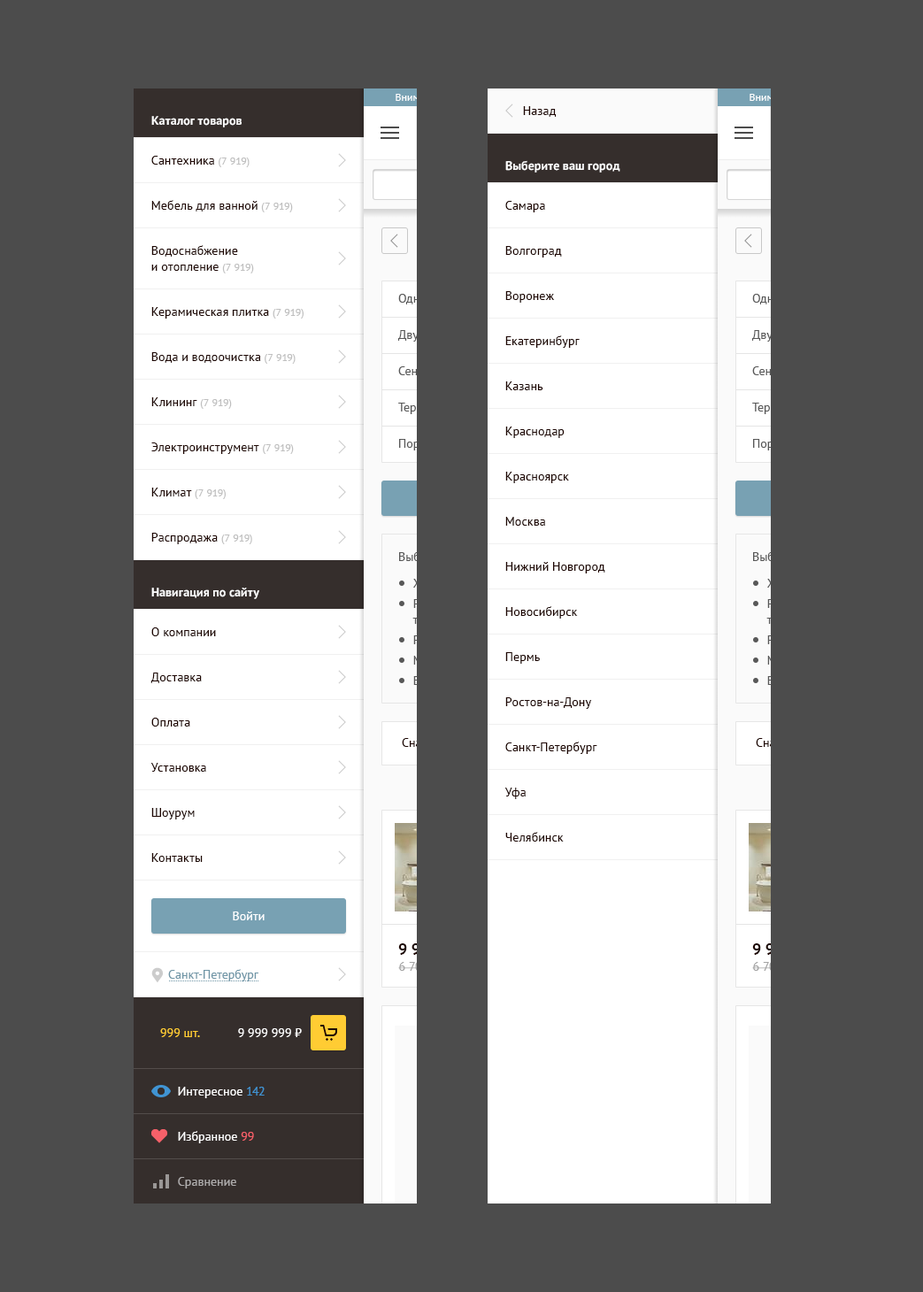
<style>
.page{position:relative;width:923px;height:1292px;background:#4c4c4c}
.page>*{position:absolute;margin:0}
.t1{font:12.4px "PTSans-Regular";color:#1e0602}
.t2{font:12.4px "PTSans-Bold";color:#ffffff}
.t3{font:12.4px/15.9px "PTSans-Regular";color:#1e0602}
.t4{font:10.6px/14.2px "PTSans-Regular";color:#bfbfbf}
.t5{font:12.4px "PTSans-Regular";color:#ffffff}
.t6{font:12.4px "PTSans-Regular";color:#6f95a6}
.t7{font:12.4px "PTSans-Regular";color:#ffcc33}
.t8{font:12.4px/17.7px "PTSans-Regular";color:#ffffff}
.t9{font:12.4px/17.7px "PTSans-Regular";color:#4094d3}
.t10{font:12.4px/15.9px "PTSans-Regular";color:#ffffff}
.t11{font:12.4px/15.9px "PTSans-Regular";color:#f66069}
.t12{font:12.4px/15.9px "PTSans-Regular";color:#aeacac}
</style>
<div class="page">
<p class="t1" style="left:523px;top:106px;width:34px;height:11px">Назад</p>
<p class="t2" style="left:151px;top:116px;width:91px;height:11px">Каталог товаров</p>
<p class="t3" style="left:151px;top:156px;width:153px;height:388px">Сантехника <span class="t4">(7 919)<br></span>Мебель для ванной <span class="t4">(7 919)<br></span>Водоснабжение<br>и отопление <span class="t4">(7 919)<br></span>Керамическая плитка <span class="t4">(7 919)<br></span>Вода и водоочистка <span class="t4">(7 919)<br></span>Клининг <span class="t4">(7 919)<br></span>Электроинструмент <span class="t4">(7 919)<br></span>Климат <span class="t4">(7 919)<br></span>Распродажа <span class="t4">(7 919)</span></p>
<p class="t2" style="left:505px;top:160px;width:115px;height:13px">Выберите ваш город</p>
<p class="t3" style="left:504px;top:201px;width:101px;height:641px">Самара<br>Волгоград<br>Воронеж<br>Екатеринбург<br>Казань<br>Краснодар<br>Красноярск<br>Москва<br>Нижний Новгород<br>Новосибирск<br>Пермь<br>Ростов-на-Дону<br>Санкт-Петербург<br>Уфа<br>Челябинск</p>
<p class="t2" style="left:151px;top:588px;width:108px;height:11px">Навигация по сайту</p>
<p class="t3" style="left:150px;top:627px;width:66px;height:235px">О компании<br>Доставка<br>Оплата<br>Установка<br>Шоурум<br>Контакты</p>
<p class="t5" style="left:233px;top:911px;width:32px;height:9px">Войти</p>
<p class="t6" style="left:168px;top:969px;width:90px;height:12px">Санкт-Петербург</p>
<p class="t7" style="left:160px;top:1028px;width:40px;height:9px">999 шт.</p>
<p class="t5" style="left:238px;top:1028px;width:64px;height:9px">9 999 999 ₽</p>
<p class="t8" style="left:178px;top:1087px;width:87px;height:101px">Интересное <span class="t9">142<br></span><span class="t10">Избранное </span><span class="t11">99<br></span><span class="t12">Сравнение</span></p>
</div>
